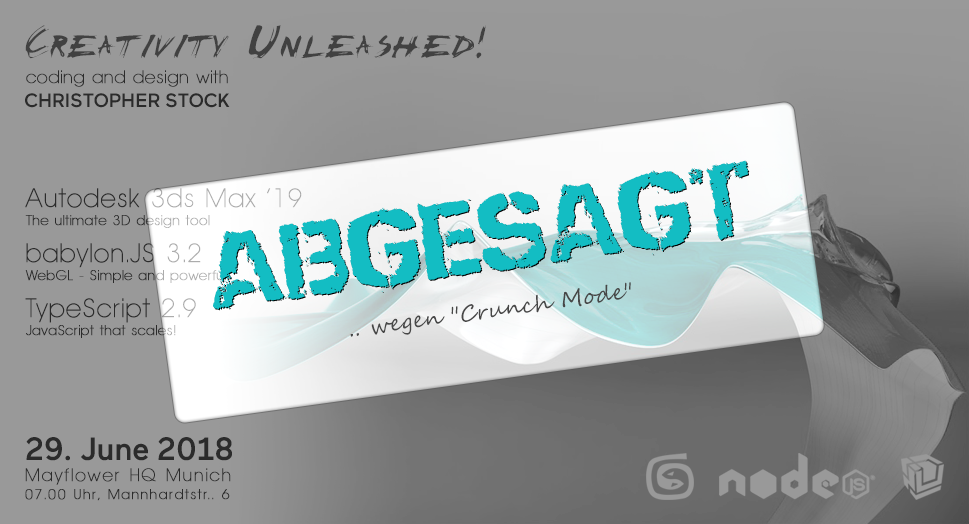
<style>
.page{position:relative;width:969px;height:524px;background:#999999}
.page>*{position:absolute;margin:0}
.t1{font:18px/25px "AvantageSmallNormal";letter-spacing:0.02em;color:#474747;font-weight:bold}
.t2{font:40.8px "ChickenScratch";color:#0bc8cf;font-variant:small-caps}
.t3{font:19.4px/24px "Maax-Medium";letter-spacing:-0.01em;color:#474747}
.t4{font:100px "NoneShallPass";letter-spacing:0.02em;color:#13bdc3}
.t5{font:14px/18px "AvantageSmallNormal";letter-spacing:0.02em;font-weight:bold}
.t6{font:26px/39px "AvantageSmallNormal";letter-spacing:0.02em;font-weight:bold}
.t7{font:26px/37px "AvantageSmallNormal";letter-spacing:0.02em;font-weight:bold}
.t8{font:22px "SegoeScript";letter-spacing:0.02em;color:#474747}
.t9{font:14px/18px "AvantageSmallNormal";letter-spacing:0.096em;color:#2b2b2b;font-weight:bold}
.t10{font:32.2px/82px "Maax-Medium";letter-spacing:-0.01em;color:#2b2b2b}
.t11{font:17.7px/21px "AvantageSmallNormal";letter-spacing:0.088em;color:#2b2b2b;font-weight:bold}
</style>
<div class="page">
<p class="t1" style="left:25px;top:25px;width:461px;height:83px"><span class="t2">Creativity Unleashed!<br></span>coding and design with<br><span class="t3">CHRISTOPHER STOCK</span></p>
<p class="t4" style="left:213px;top:160px;width:536px;height:150px;rotate:-8deg">abgesagt</p>
<p class="t5" style="left:25px;top:188px;width:277px;height:150px"><span class="t6">Autodesk 3ds Max ‘19<br></span>The ultimate 3D design tool<br><span class="t7">babylon.JS 3.2<br></span>WebGL - Simple and powerful!<br><span class="t7">TypeScript 2.9<br></span>JavaScript that scales!</p>
<p class="t8" style="left:350px;top:282px;width:281px;height:55px;rotate:-8deg"><span class="t4"><br></span>.. wegen "Crunch Mode"</p>
<p class="t9" style="left:25px;top:437px;width:207px;height:64px"><span class="t10">29. June 2018<br></span><span class="t11">Mayflower HQ Munich<br></span>07.00 Uhr, Mannhardtstr.. 6</p>
</div>
